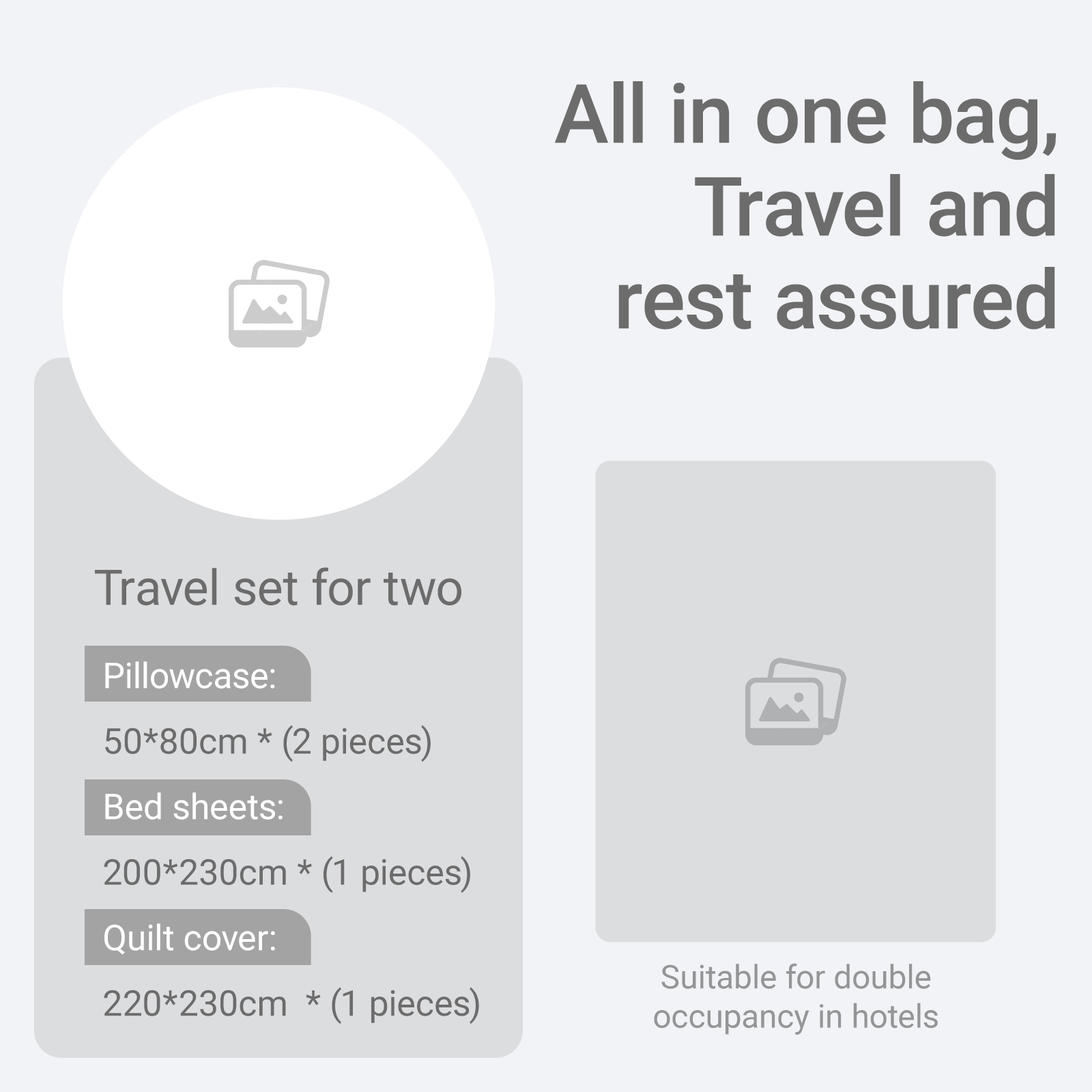
<style>
.page{position:relative;width:1092px;height:1092px;background:#f2f3f6}
.page>*{position:absolute;margin:0}
.t1{font:81.9px/92.8px "Roboto-Medium";color:#6c6c6c}
.t2{font:49.1px "Roboto-Regular";color:#6c6c6c}
.t3{font:35.5px/65.5px "Roboto-Regular";color:#6c6c6c}
.t4{font:35.5px/65.5px "Roboto-Regular";color:#ffffff}
.t5{font:32.8px "Roboto-Regular";color:#949596}
</style>
<div class="page">
<p class="t1" style="left:555px;top:81px;width:501px;height:249px;text-align:right">All in one bag,<br>Travel and<br> rest assured</p>
<p class="t2" style="left:95px;top:567px;width:366px;height:38px">Travel set for two</p>
<p class="t3" style="left:104px;top:661px;width:375px;height:363px"><span class="t4">Pillowcase:<br></span>50*80cm * (2 pieces)<br><span class="t4">Bed sheets: <br></span>200*230cm * (1 pieces)<br><span class="t4">Quilt cover: <br></span>220*230cm  * (1 pieces)</p>
<p class="t5" style="left:654px;top:963px;width:284px;height:72px;text-align:center">Suitable for double<br>occupancy in hotels</p>
</div>
